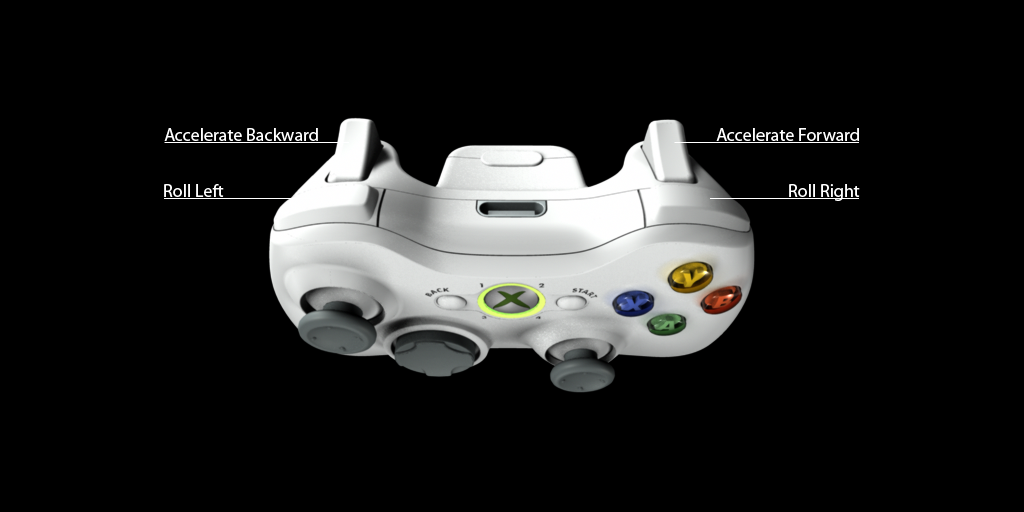
<style>
.page{position:relative;width:1024px;height:512px;background:#000000}
.page>*{position:absolute;margin:0}
.t1{font:18px "MyriadPro-Regular";color:#ffffff}
</style>
<div class="page">
<p class="t1" style="left:164px;top:128px;width:154px;height:13px">Accelerate Backward</p>
<p class="t1" style="left:716px;top:128px;width:143px;height:13px">Accelerate Forward</p>
<p class="t1" style="left:164px;top:184px;width:60px;height:13px">Roll Left</p>
<p class="t1" style="left:789px;top:184px;width:71px;height:17px">Roll Right</p>
</div>
